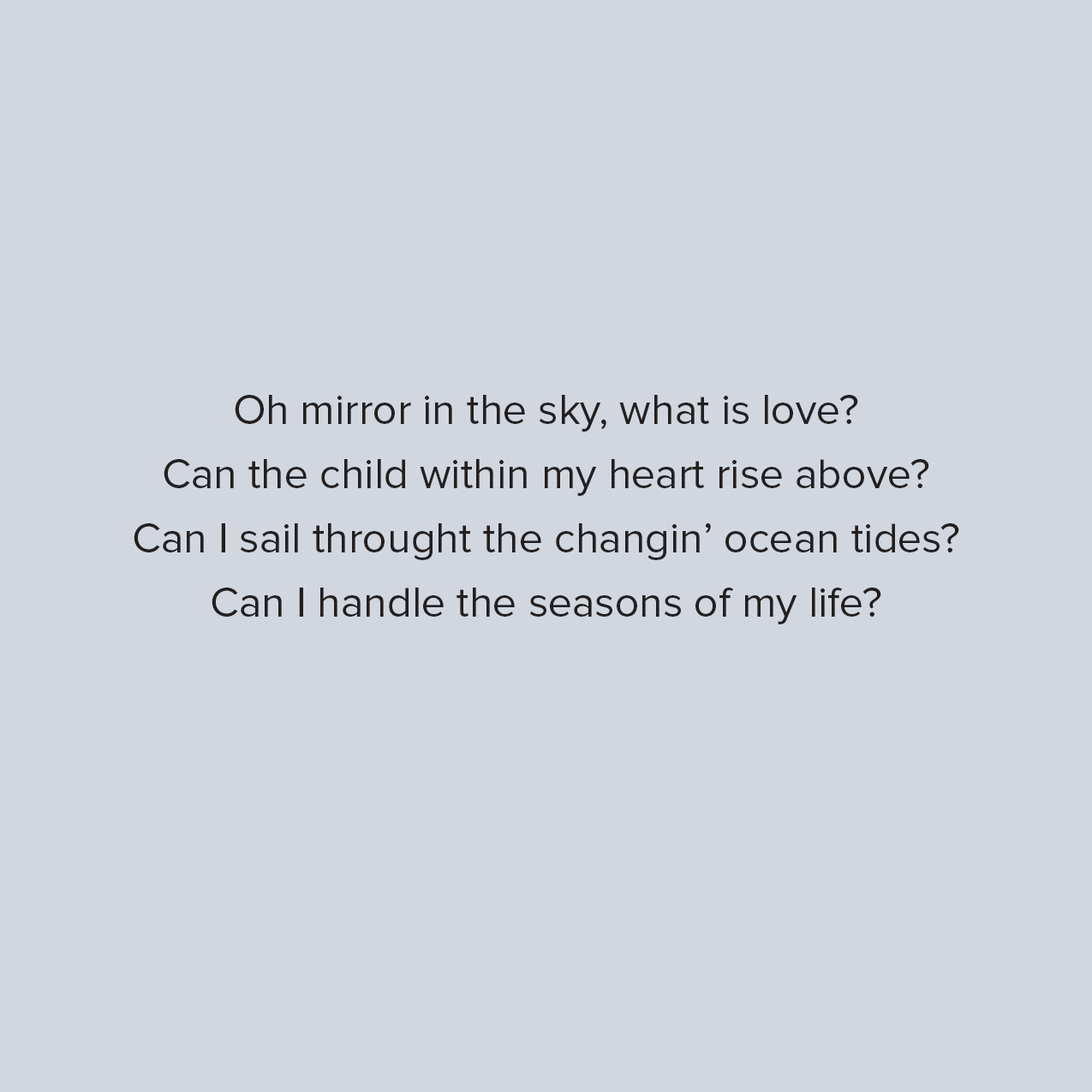
<style>
.page{position:relative;width:1092px;height:1092px;background:#d2d7df}
.page>*{position:absolute;margin:0}
.t1{font:42.8px/64.2px "ProximaNova-Regular";color:#231f20}
</style>
<div class="page">
<p class="t1" style="left:134px;top:395px;width:825px;height:229px;text-align:center">Oh mirror in the sky, what is love?<br>Can the child within my heart rise above?<br>Can I sail throught the changin’ ocean tides?<br>Can I handle the seasons of my life?</p>
</div>
